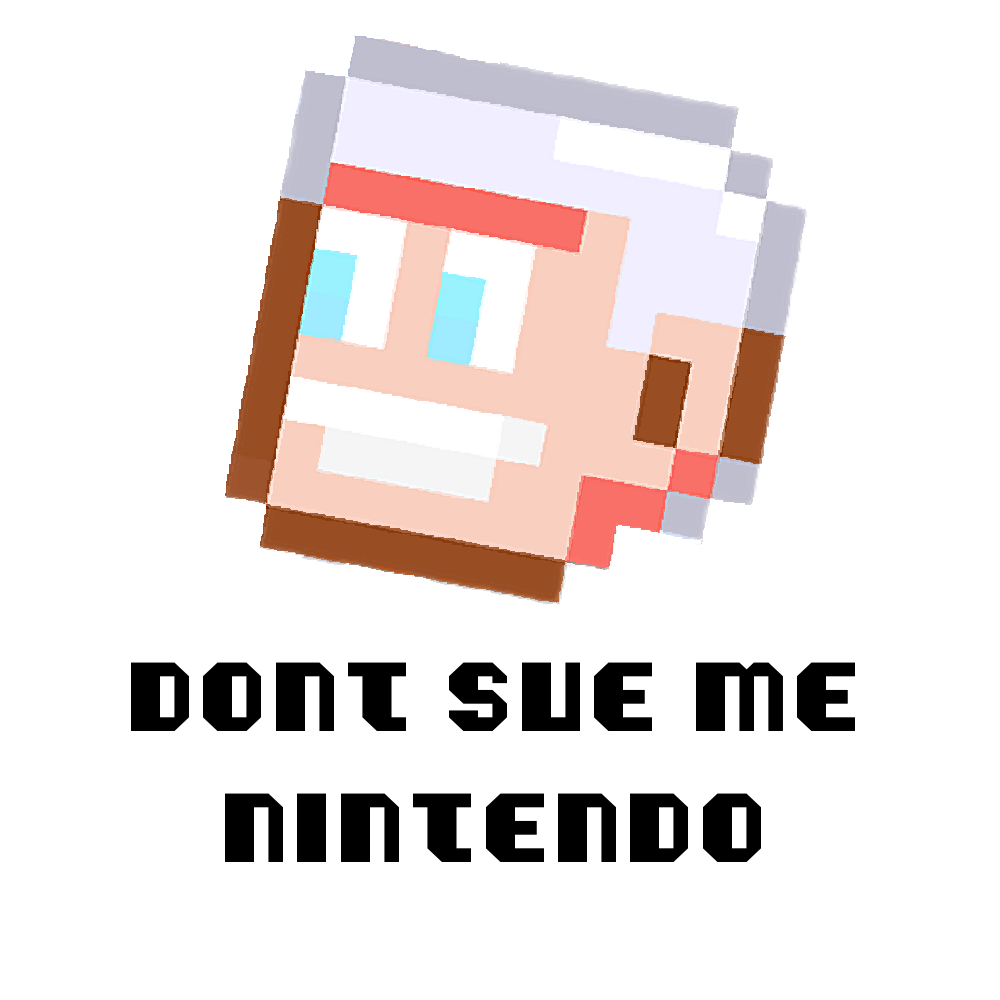
<style>
.page{position:relative;width:1000px;height:1000px;background:#ffffff}
.page>*{position:absolute;margin:0}
.t1{font:109.5px "Vipond-Octic";color:#000000;scale:1.06 1}
</style>
<div class="page">
<p class="t1" style="left:131px;top:662px;width:724px;height:200px;text-align:center">dont sue me<br>nintendo</p>
</div>
